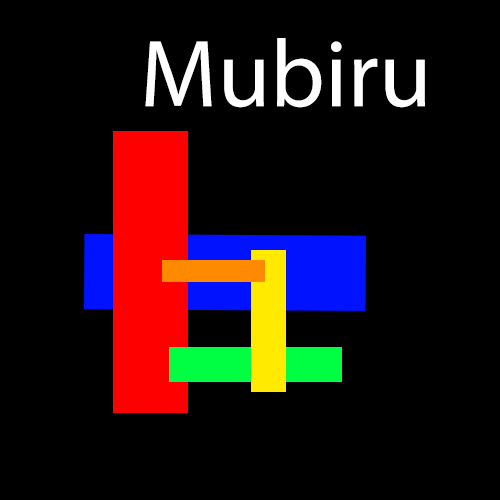
<style>
.page{position:relative;width:500px;height:500px;background:#000000}
.page>*{position:absolute;margin:0}
.t1{font:96px "MyriadPro-Regular";color:#ffffff}
</style>
<div class="page">
<p class="t1" style="left:145px;top:38px;width:280px;height:70px">Mubiru</p>
</div>
